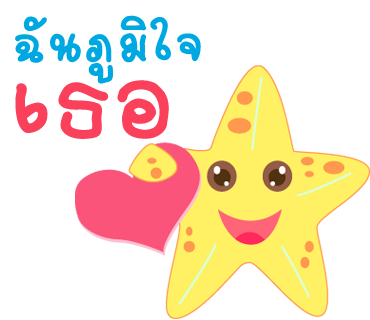
<style>
.page{position:relative;width:370px;height:320px;background:#ffffff}
.page>*{position:absolute;margin:0}
.t1{font:78px "2005_iannnnnMTV";letter-spacing:0.025em;color:#00a8e1;scale:1.06 1}
.t2{font:152px "2005_iannnnnMTV";letter-spacing:0.025em;color:#fa405a;scale:1.06 1}
</style>
<div class="page">
<p class="t1" style="left:15px;top:15px;width:186px;height:69px">ฉันภูมิใจ</p>
<p class="t2" style="left:15px;top:80px;width:154px;height:59px">เธอ</p>
</div>
